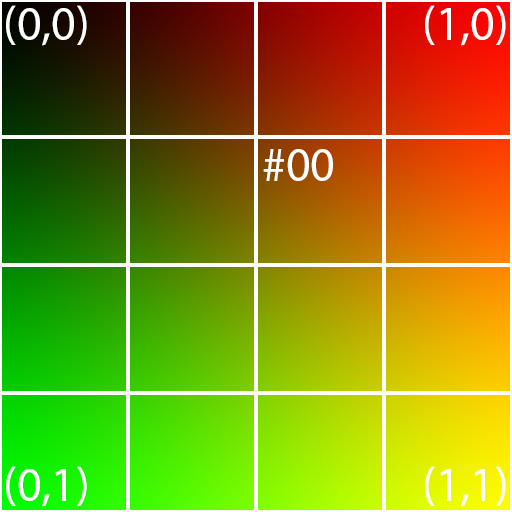
<style>
.page{position:relative;width:512px;height:512px}
.page>*{position:absolute;margin:0}
.t1{font:48px "MyriadPro-Regular";color:#ffffff}
</style>
<div class="page">
<p class="t1" style="left:6px;top:5px;width:81px;height:41px">(0,0)</p>
<p class="t1" style="left:425px;top:5px;width:81px;height:41px">(1,0)</p>
<p class="t1" style="left:263px;top:149px;width:70px;height:32px">#00</p>
<p class="t1" style="left:6px;top:466px;width:81px;height:41px">(0,1)</p>
<p class="t1" style="left:425px;top:466px;width:81px;height:41px">(1,1)</p>
</div>
